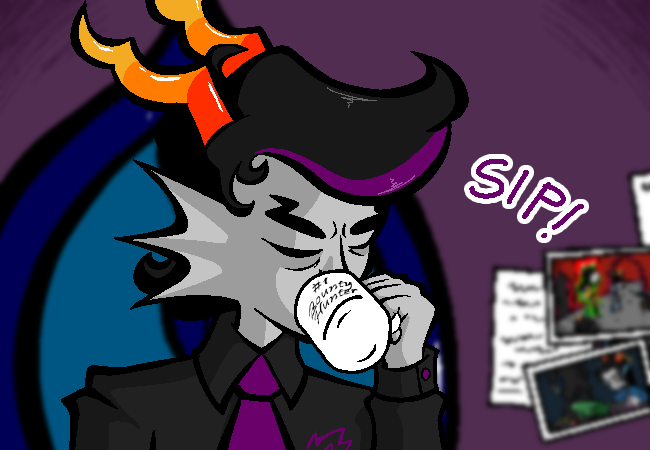
<style>
.page{position:relative;width:650px;height:450px;background:#512d51}
.page>*{position:absolute;margin:0}
.t1{font:12.2px/9px "Pristina-Regular";color:#010101;scale:1.88 1}
</style>
<div class="page">
<p class="t1" style="left:309px;top:277px;width:49px;height:48px;text-align:center;rotate:-39deg">#1<br>Bounty<br>Hunter</p>
</div>
